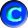
<style>
.page{position:relative;width:28px;height:28px}
.page>*{position:absolute;margin:0}
.t1{font:19.7px "Verdana-Bold";font-weight:bold;scale:1.15 1}
</style>
<div class="page">
<p class="t1" style="left:6px;top:6px;width:16px;height:16px">C</p>
</div>
